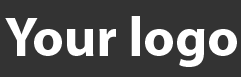
<style>
.page{position:relative;width:241px;height:77px;background:#333333}
.page>*{position:absolute;margin:0}
.t1{font:55px "MyriadPro-Bold";color:#ffffff}
</style>
<div class="page">
<p class="t1" style="left:5px;top:16px;width:232px;height:51px">Your logo</p>
</div>
